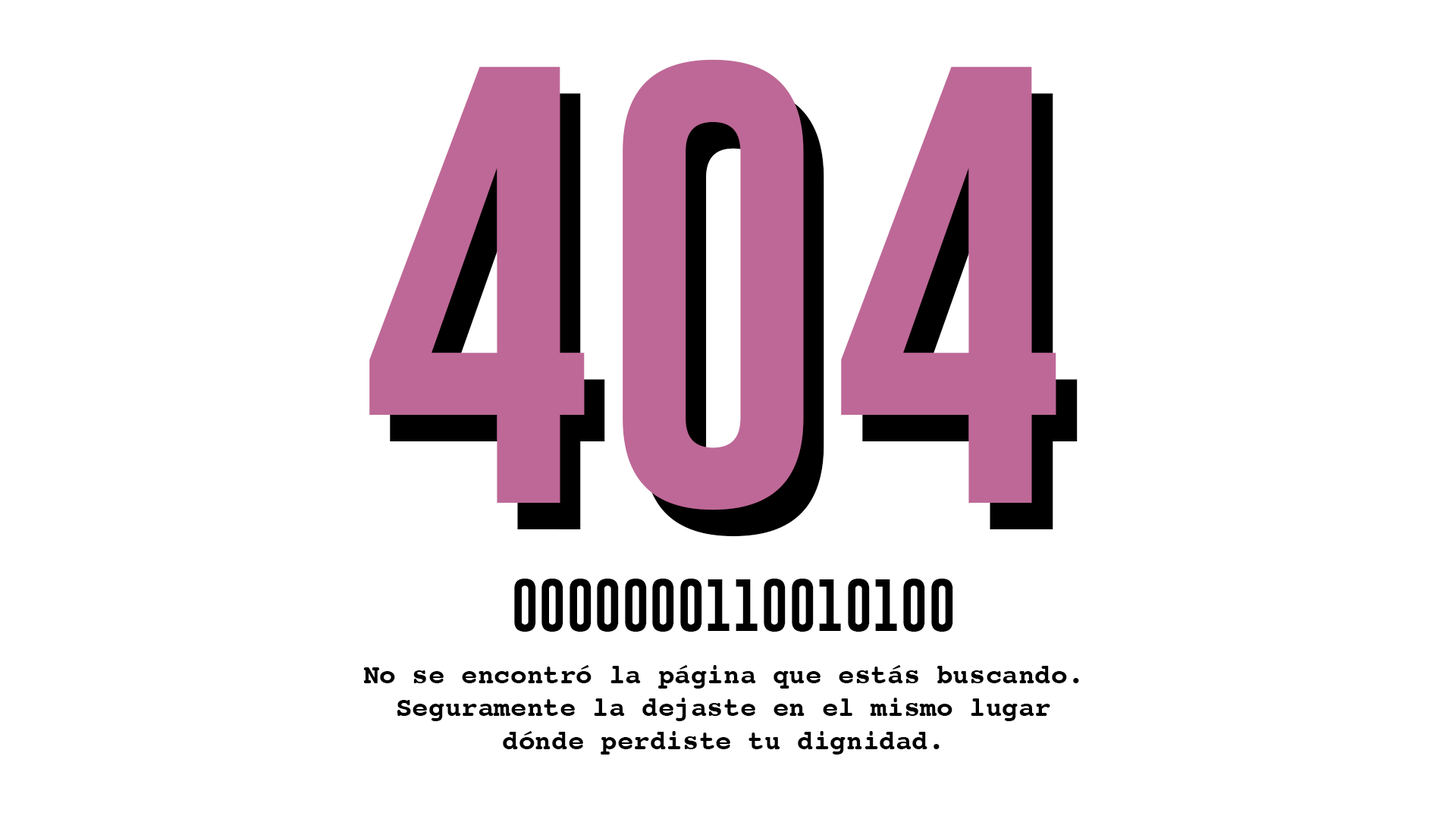
<style>
.page{position:relative;width:1456px;height:819px;background:#ffffff}
.page>*{position:absolute;margin:0}
.t1{font:455px "Gobold";color:#be6897}
.t2{font:455px "Gobold"}
.t3{font:53.8px "Gobold";color:#000000}
.t4{font:27.3px "Courier-Bold";color:#000000}
</style>
<div class="page">
<p class="t1" style="left:369px;top:59px;width:687px;height:451px">404</p>
<p class="t2" style="left:390px;top:86px;width:688px;height:451px">404</p>
<p class="t3" style="left:514px;top:579px;width:439px;height:53px">0000000110010100</p>
<p class="t4" style="left:363px;top:665px;width:716px;height:90px;text-align:center">No se encontró la página que estás buscando.<br>Seguramente la dejaste en el mismo lugar dónde perdiste tu dignidad.</p>
</div>
